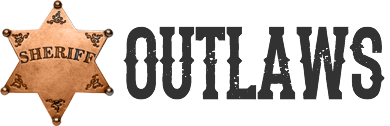
<style>
.page{position:relative;width:390px;height:126px;background:#ffffff}
.page>*{position:absolute;margin:0}
.t1{font:72px "thedeadsaloon-Regular";color:#323232}
</style>
<div class="page">
<p class="t1" style="left:123px;top:26px;width:262px;height:74px">OUTLAWS</p>
</div>
